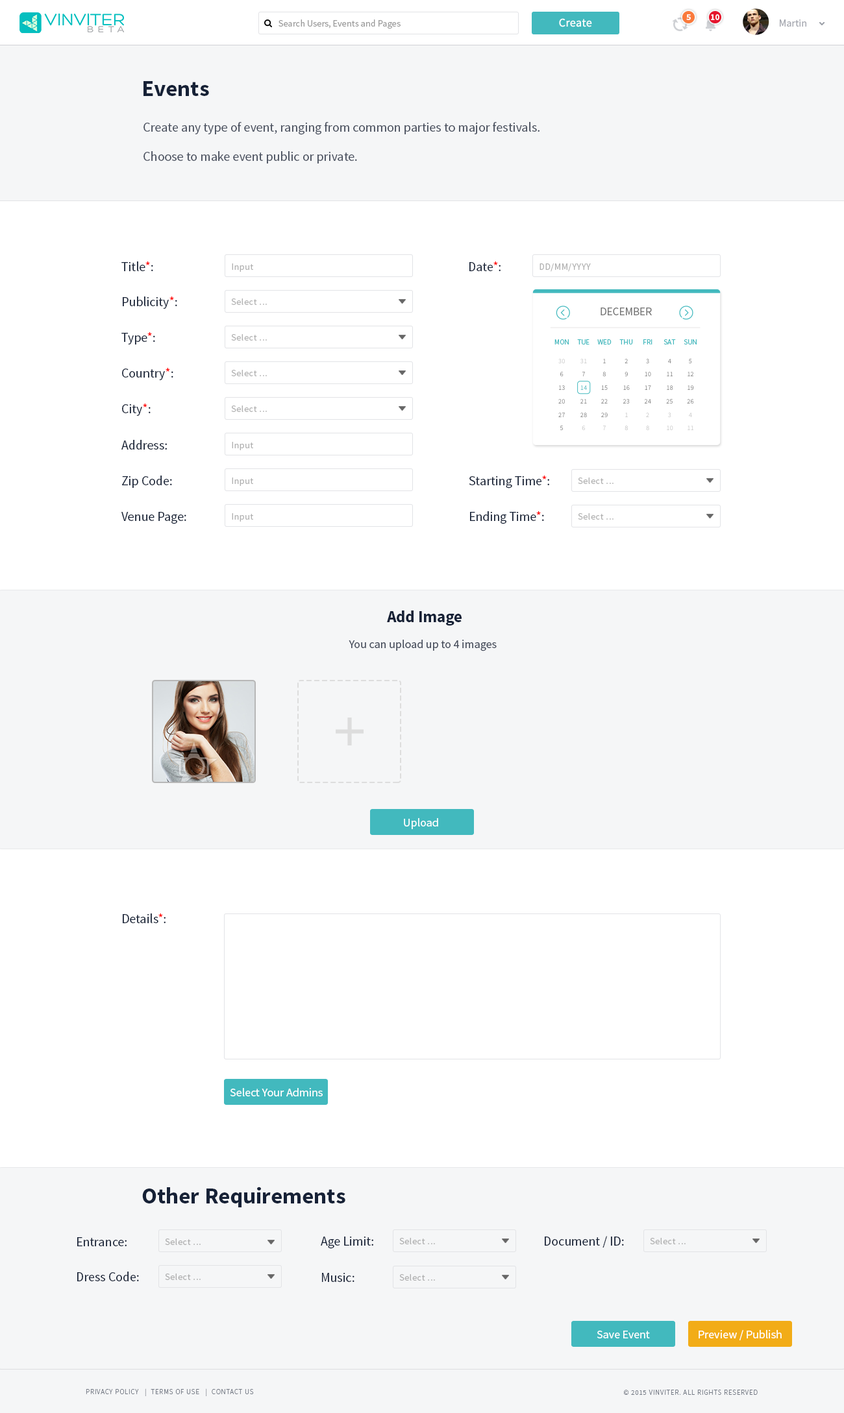
<style>
.page{position:relative;width:844px;height:1413px;background:#ffffff}
.page>*{position:absolute;margin:0}
.t1{font:8.4px "SourceSansPro-Bold";color:#ffffff}
.t2{font:9.3px "SourceSansPro-Regular";color:#999999}
.t3{font:11.7px "SourceSansPro-Regular";letter-spacing:0.02em;color:#ffffff}
.t4{font:10.4px "SourceSansPro-Regular";color:#a3a6ae}
.t5{font:22.7px "SourceSansPro-Bold";color:#162136}
.t6{font:13px "SourceSansPro-Regular";color:#464d5c}
.t7{font:13px "SourceSansPro-Regular";color:#162136}
.t8{font:13px "SourceSansPro-Regular";color:#ff0000}
.t9{font:9.1px "SourceSansPro-Regular";letter-spacing:0.05em;color:#999999}
.t10{font:11.2px "SourceSansPro-Regular";color:#767676;text-transform:uppercase}
.t11{font:7.3px "SourceSansPro-Regular";color:#42b9be;text-transform:uppercase}
.t12{font:6.7px/13.5px "SourceSansPro-Regular";color:#767676}
.t13{font:6.7px/13.5px "SourceSansPro-Regular";color:#c5c5c5}
.t14{font:6.7px/13.5px "SourceSansPro-Regular";color:#42b9be}
.t15{font:6.7px/13.5px "SourceSansPro-Regular";color:#c1c1c1}
.t16{font:6.7px/13.5px "SourceSansPro-Regular";color:#c9c9c9}
.t17{font:16.2px "SourceSansPro-Bold";color:#162136}
.t18{font:11.7px "SourceSansPro-Regular";color:#464d5c}
.t19{font:11.7px "SourceSansPro-Regular";color:#ffffff}
.t20{font:7.1px "SourceSansPro-Light";letter-spacing:0.075em;color:#747a85;text-transform:uppercase}
</style>
<div class="page">
<p class="t1" style="left:686px;top:14px;width:4px;height:6px">5</p>
<p class="t1" style="left:711px;top:14px;width:8px;height:6px">10</p>
<p class="t2" style="left:278px;top:19px;width:122px;height:10px">Search Users, Events and Pages</p>
<p class="t3" style="left:559px;top:18px;width:33px;height:9px">Create</p>
<p class="t4" style="left:779px;top:19px;width:27px;height:8px">Martin</p>
<p class="t5" style="left:143px;top:81px;width:66px;height:15px">Events</p>
<p class="t6" style="left:143px;top:122px;width:396px;height:13px">Create any type of event, ranging from common parties to major festivals.</p>
<p class="t6" style="left:143px;top:151px;width:214px;height:13px">Choose to make event public or private.</p>
<p class="t7" style="left:121px;top:262px;width:32px;height:9px">Title<span class="t8">*</span>:</p>
<p class="t9" style="left:232px;top:263px;width:21px;height:9px;opacity:0.8">Input</p>
<p class="t7" style="left:469px;top:262px;width:31px;height:9px">Date<span class="t8">*</span>:</p>
<p class="t9" style="left:539px;top:263px;width:52px;height:9px;opacity:0.8">DD/MM/YYYY</p>
<p class="t7" style="left:123px;top:297px;width:54px;height:12px">Publicity<span class="t8">*</span>:</p>
<p class="t9" style="left:231px;top:299px;width:36px;height:6px;opacity:0.8">Select ...</p>
<p class="t10" style="left:600px;top:308px;width:52px;height:7px">December</p>
<p class="t7" style="left:121px;top:332px;width:34px;height:13px">Type<span class="t8">*</span>:</p>
<p class="t9" style="left:231px;top:334px;width:36px;height:7px;opacity:0.8">Select ...</p>
<p class="t11" style="left:554px;top:339px;width:14px;height:6px">Mon</p>
<p class="t11" style="left:577px;top:339px;width:12px;height:6px">TUE</p>
<p class="t11" style="left:597px;top:339px;width:14px;height:6px">WED</p>
<p class="t11" style="left:619px;top:339px;width:14px;height:6px">THU</p>
<p class="t11" style="left:643px;top:339px;width:9px;height:6px">FRI</p>
<p class="t11" style="left:663px;top:339px;width:13px;height:6px">SAT</p>
<p class="t11" style="left:683px;top:339px;width:13px;height:6px">SUN</p>
<p class="t12" style="left:558px;top:359px;width:7px;height:71px;text-align:center"><span class="t13">30<br></span>6<br>13<br>20<br>27<br>5</p>
<p class="t12" style="left:580px;top:359px;width:7px;height:71px;text-align:center"><span class="t13">31<br></span>7<br><span class="t14">14<br></span>21<br>28<br><span class="t13">6</span></p>
<p class="t12" style="left:601px;top:359px;width:6px;height:71px;text-align:center">1<br>8<br>15<br>22<br>29<br><span class="t13">7</span></p>
<p class="t12" style="left:622px;top:359px;width:7px;height:71px;text-align:center">2<br>9<br>16<br>23<br><span class="t15">1<br>8</span></p>
<p class="t12" style="left:644px;top:359px;width:7px;height:71px;text-align:center">3<br>10<br>17<br>24<br><span class="t13">2<br>8</span></p>
<p class="t12" style="left:666px;top:359px;width:7px;height:71px;text-align:center">4<br>11<br>18<br>25<br><span class="t13">3<br>10</span></p>
<p class="t12" style="left:687px;top:359px;width:7px;height:71px;text-align:center">5<br>12<br>19<br>26<br><span class="t16">4<br>11</span></p>
<p class="t7" style="left:122px;top:368px;width:51px;height:12px">Country<span class="t8">*</span>:</p>
<p class="t9" style="left:231px;top:370px;width:36px;height:6px;opacity:0.8">Select ...</p>
<p class="t7" style="left:122px;top:404px;width:29px;height:12px">City<span class="t8">*</span>:</p>
<p class="t9" style="left:231px;top:406px;width:36px;height:6px;opacity:0.8">Select ...</p>
<p class="t7" style="left:121px;top:440px;width:46px;height:10px">Address:</p>
<p class="t9" style="left:232px;top:442px;width:21px;height:8px;opacity:0.8">Input</p>
<p class="t7" style="left:122px;top:476px;width:50px;height:12px">Zip Code:</p>
<p class="t9" style="left:232px;top:478px;width:21px;height:8px;opacity:0.8">Input</p>
<p class="t7" style="left:469px;top:476px;width:80px;height:13px">Starting Time<span class="t8">*</span>:</p>
<p class="t9" style="left:578px;top:478px;width:35px;height:6px;opacity:0.8">Select ...</p>
<p class="t7" style="left:121px;top:512px;width:65px;height:12px">Venue Page:</p>
<p class="t9" style="left:232px;top:513px;width:21px;height:9px;opacity:0.8">Input</p>
<p class="t7" style="left:470px;top:511px;width:74px;height:13px">Ending Time<span class="t8">*</span>:</p>
<p class="t9" style="left:578px;top:513px;width:35px;height:7px;opacity:0.8">Select ...</p>
<p class="t17" style="left:387px;top:611px;width:74px;height:15px">Add Image</p>
<p class="t18" style="left:348px;top:640px;width:148px;height:12px">You can upload up to 4 images</p>
<p class="t19" style="left:404px;top:818px;width:34px;height:11px">Upload</p>
<p class="t7" style="left:123px;top:914px;width:42px;height:9px">Details<span class="t8">*</span>:</p>
<p class="t19" style="left:230px;top:1088px;width:93px;height:9px">Select Your Admins</p>
<p class="t5" style="left:142px;top:1187px;width:203px;height:21px">Other Requirements</p>
<p class="t7" style="left:77px;top:1238px;width:50px;height:9px">Entrance:</p>
<p class="t9" style="left:165px;top:1239px;width:36px;height:6px;opacity:0.8">Select ...</p>
<p class="t7" style="left:321px;top:1237px;width:52px;height:12px">Age Limit:</p>
<p class="t9" style="left:399px;top:1238px;width:36px;height:7px;opacity:0.8">Select ...</p>
<p class="t7" style="left:544px;top:1236px;width:80px;height:12px">Document / ID:</p>
<p class="t9" style="left:650px;top:1238px;width:35px;height:7px;opacity:0.8">Select ...</p>
<p class="t7" style="left:77px;top:1272px;width:62px;height:10px">Dress Code:</p>
<p class="t9" style="left:165px;top:1274px;width:36px;height:6px;opacity:0.8">Select ...</p>
<p class="t7" style="left:322px;top:1273px;width:32px;height:9px">Music:</p>
<p class="t9" style="left:399px;top:1275px;width:36px;height:6px;opacity:0.8">Select ...</p>
<p class="t19" style="left:596px;top:1331px;width:54px;height:8px">Save Event</p>
<p class="t19" style="left:698px;top:1330px;width:83px;height:11px">Preview / Publish</p>
<p class="t20" style="left:86px;top:1389px;width:168px;height:8px">Privacy Policy   |  Terms of Use   |  Contact us</p>
<p class="t20" style="left:623px;top:1390px;width:134px;height:5px">© 2015 VINVITER. All rights reserved</p>
</div>
